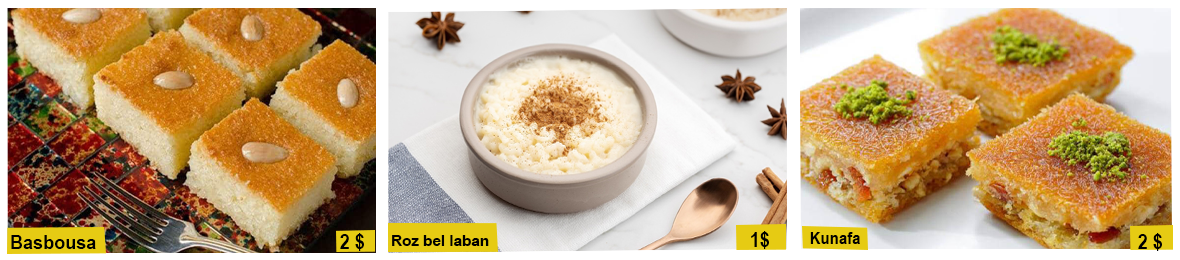
<style>
.page{position:relative;width:1180px;height:260px}
.page>*{position:absolute;margin:0}
.t1{font:20.8px "ArialNarrow-Bold";color:#000000;scale:1.05 1}
.t2{font:17.5px "ArialNarrow-Bold";color:#000000;scale:1.05 1}
.t3{font:18.7px "ArialNarrow-Bold";color:#000000;scale:1.17 1}
.t4{font:15.8px "ArialNarrow-Bold";color:#000000;scale:1.17 1}
</style>
<div class="page">
<p class="t1" style="left:340px;top:233px;width:24px;height:18px">2 $</p>
<p class="t1" style="left:751px;top:231px;width:18px;height:18px">1$</p>
<p class="t2" style="left:810px;top:232px;width:50px;height:12px">Kunafa</p>
<p class="t1" style="left:1138px;top:233px;width:24px;height:18px">2 $</p>
<p class="t3" style="left:11px;top:235px;width:85px;height:14px">Basbousa</p>
<p class="t4" style="left:392px;top:235px;width:97px;height:11px">Roz bel laban</p>
</div>
